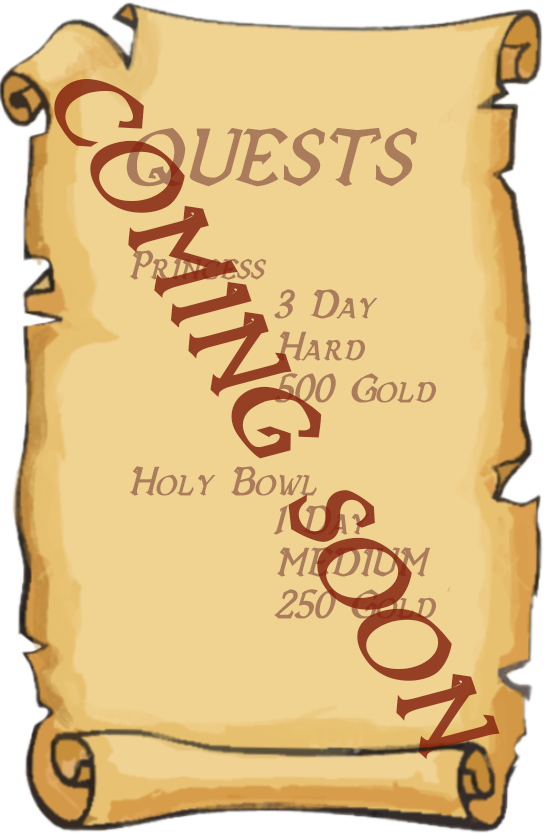
<style>
.page{position:relative;width:547px;height:835px;background:#f0d291}
.page>*{position:absolute;margin:0}
.t1{font:117px "Vecna-BoldItalic";color:#953f24}
.t2{font:82.5px "Vecna-BoldItalic";color:#ab7c5c}
.t3{font:41.6px "Vecna-BoldItalic";color:#ab7c5c}
</style>
<div class="page">
<p class="t1" style="left:54px;top:78px;width:446px;height:682px;rotate:60deg">COMING SOON</p>
<p class="t2" style="left:126px;top:127px;width:291px;height:60px">QUESTS</p>
<p class="t3" style="left:129px;top:250px;width:137px;height:30px">Prıncess</p>
<p class="t3" style="left:274px;top:289px;width:104px;height:30px">3 Day</p>
<p class="t3" style="left:276px;top:331px;width:89px;height:30px">Hard</p>
<p class="t3" style="left:274px;top:373px;width:162px;height:30px">500 Gold</p>
<p class="t3" style="left:129px;top:466px;width:188px;height:30px">Holy Bowl</p>
<p class="t3" style="left:273px;top:505px;width:97px;height:30px">1 Day</p>
<p class="t3" style="left:276px;top:547px;width:155px;height:30px">MEDIUM</p>
<p class="t3" style="left:274px;top:589px;width:162px;height:30px">250 Gold</p>
</div>
